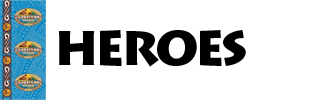
<style>
.page{position:relative;width:309px;height:100px;background:#ffffff}
.page>*{position:absolute;margin:0}
.t1{font:48.3px "LithosPro-Black";letter-spacing:-0.075em;color:#000000}
</style>
<div class="page">
<p class="t1" style="left:59px;top:30px;width:187px;height:37px">HEROES</p>
</div>
